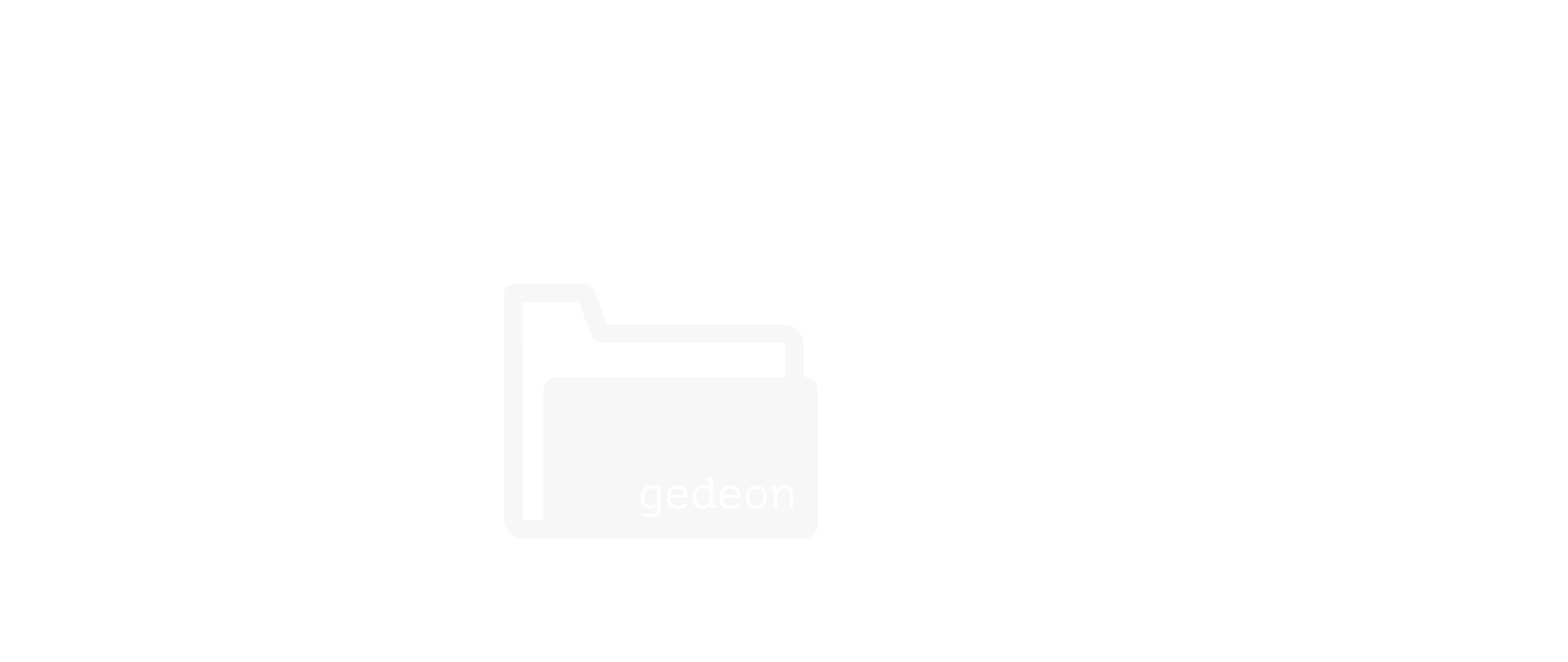
<style>
.page{position:relative;width:1568px;height:662px;background:#ffffff}
.page>*{position:absolute;margin:0}
.t1{font:44.1px "PTMono-Regular";color:#ffffff}
</style>
<div class="page">
<p class="t1" style="left:640px;top:477px;width:153px;height:40px">gedeon</p>
</div>
